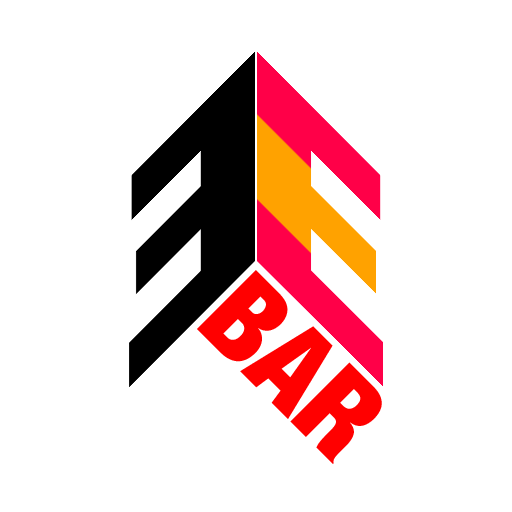
<style>
.page{position:relative;width:512px;height:512px;background:#ffffff}
.page>*{position:absolute;margin:0}
.t1{font:116.8px "HelveticaNeue-CondensedBlack";color:#ff0000}
</style>
<div class="page">
<p class="t1" style="left:197px;top:270px;width:185px;height:194px;rotate:45deg">BAR</p>
</div>
